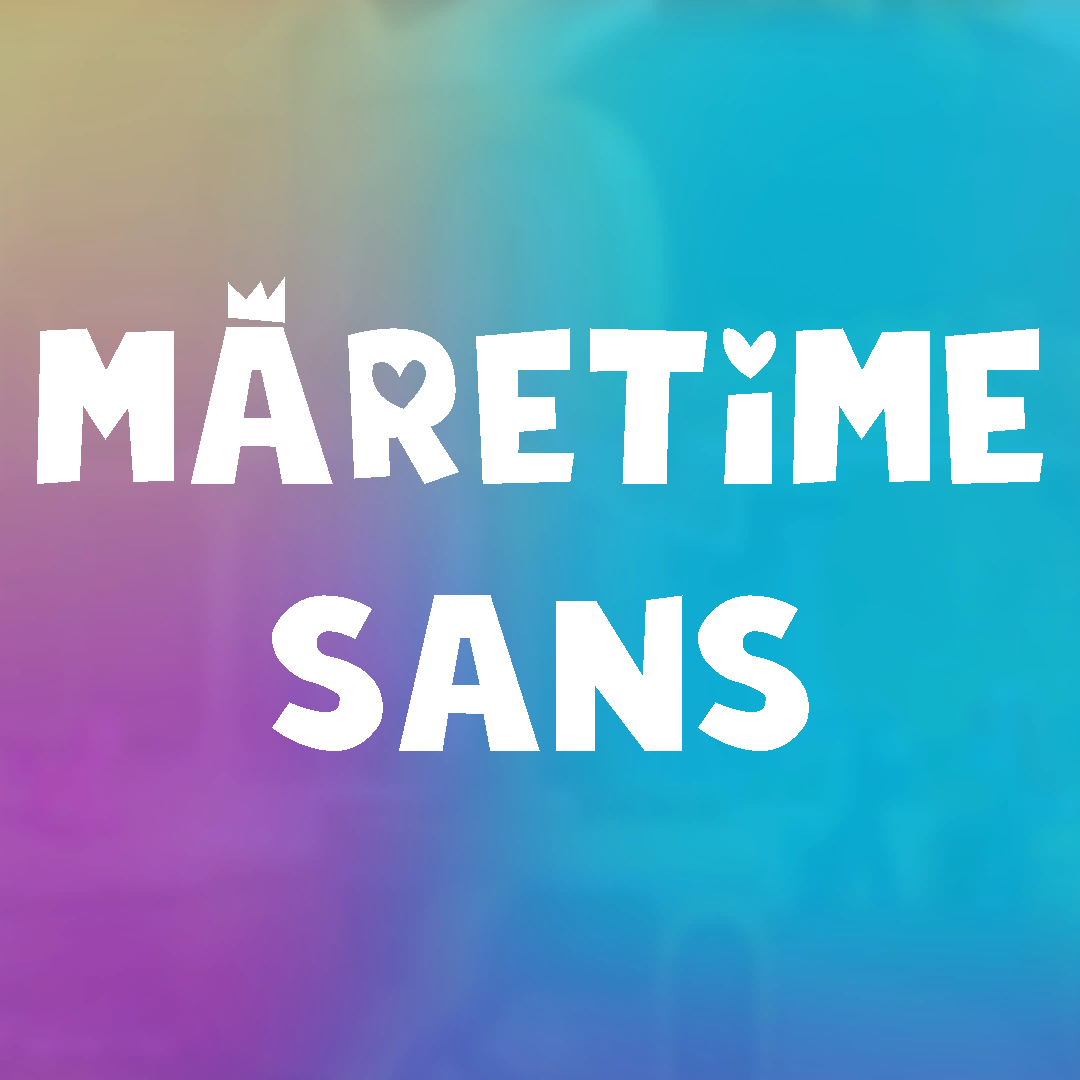
<style>
.page{position:relative;width:1080px;height:1080px}
.page>*{position:absolute;margin:0}
.t1{font:388.8px/267px "MLPMaretimeSansRegular";color:#ffffff}
</style>
<div class="page">
<p class="t1" style="left:37px;top:277px;width:1006px;height:474px;text-align:center">MARETIME<br>SaNS</p>
</div>
